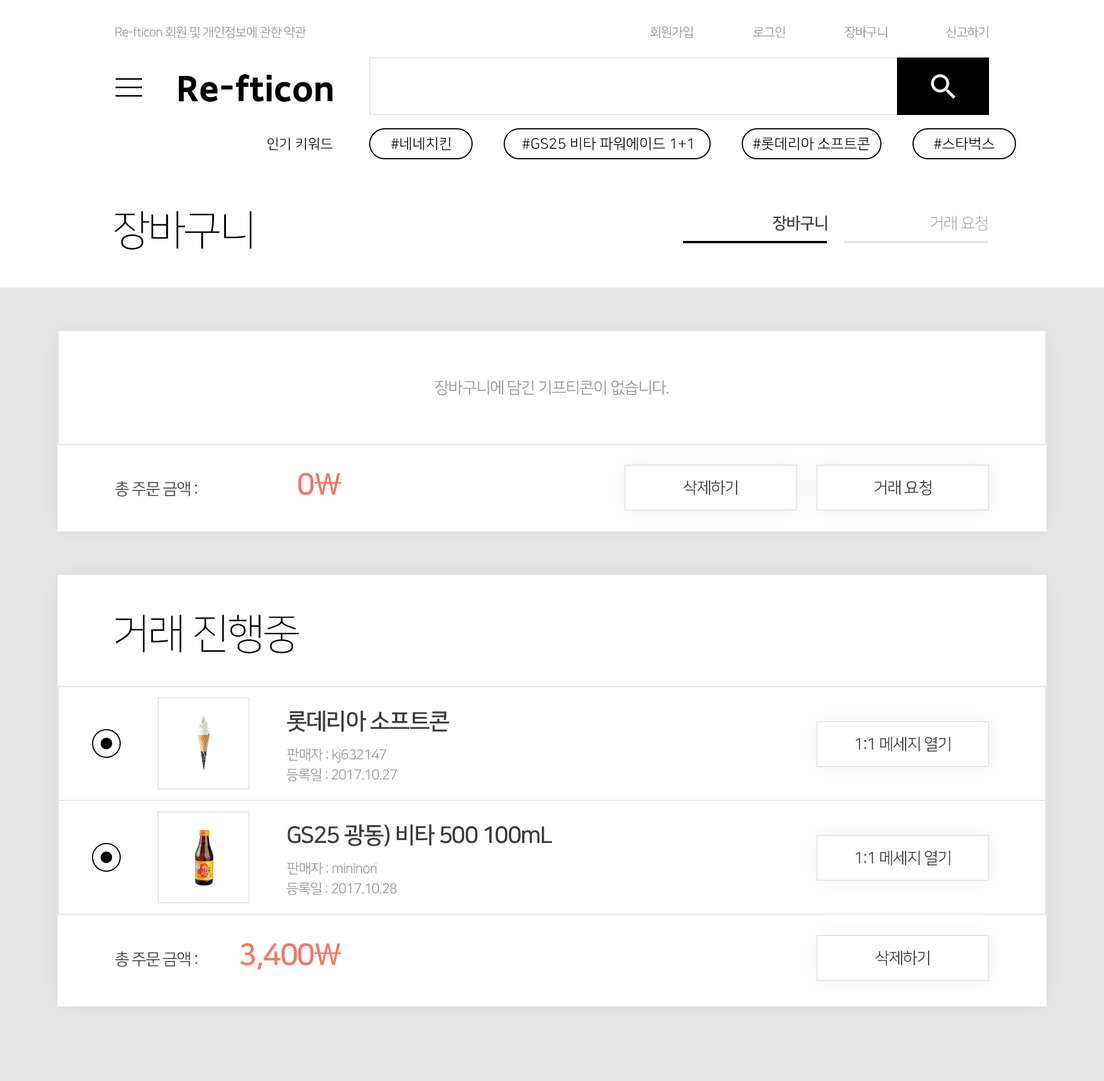
<style>
.page{position:relative;width:1104px;height:1081px;background:#ffffff}
.page>*{position:absolute;margin:0}
.t1{font:12.6px "NanumSquareOTFR";letter-spacing:-0.05em;color:#959595}
.t2{font:34.5px "SDGothicNeoc-gExBd";color:#000000}
.t3{font:13.8px "NanumSquareOTFR";color:#000000}
.t4{font:14.5px "NanumSquareOTFR";color:#000000}
.t5{font:41.4px "NanumSquareOTFL";letter-spacing:-0.05em;color:#000000}
.t6{font:16.1px "NanumSquareOTFB";letter-spacing:-0.05em;color:#3c3c3c}
.t7{font:16.1px "NanumSquareOTFL";letter-spacing:-0.05em;color:#959595}
.t8{font:16.1px "NanumSquareOTFR";letter-spacing:-0.05em;color:#959595}
.t9{font:29.9px "NanumSquareOTFB";letter-spacing:-0.05em;color:#f17969}
.t10{font:16.1px "NanumSquareOTFR";letter-spacing:-0.05em;color:#3c3c3c}
.t11{font:16.1px "NanumSquareOTFR";letter-spacing:-0.05em;color:#353535}
.t12{font:23px "NanumSquareOTFB";letter-spacing:-0.05em;color:#3c3c3c}
.t13{font:13.8px "NanumSquareOTFR";letter-spacing:-0.05em;color:#959595}
</style>
<div class="page">
<p class="t1" style="left:116px;top:26px;width:190px;height:13px">Re-fticon 회원 및 개인정보에 관한 약관</p>
<p class="t1" style="left:650px;top:26px;width:43px;height:12px">회원가입</p>
<p class="t1" style="left:753px;top:26px;width:32px;height:12px">로그인</p>
<p class="t1" style="left:844px;top:26px;width:43px;height:13px">장바구니</p>
<p class="t1" style="left:945px;top:26px;width:43px;height:12px">신고하기</p>
<p class="t2" style="left:179px;top:74px;width:154px;height:28px">Re-fticon</p>
<p class="t3" style="left:267px;top:137px;width:65px;height:14px">인기 키워드</p>
<p class="t4" style="left:391px;top:137px;width:60px;height:14px">#네네치킨</p>
<p class="t4" style="left:522px;top:137px;width:170px;height:14px">#GS25 비타 파워에이드 1+1</p>
<p class="t4" style="left:753px;top:137px;width:117px;height:14px">#롯데리아 소프트콘</p>
<p class="t4" style="left:933px;top:137px;width:61px;height:14px">#스타벅스</p>
<p class="t5" style="left:114px;top:211px;width:138px;height:38px">장바구니</p>
<p class="t6" style="left:772px;top:216px;width:55px;height:15px">장바구니</p>
<p class="t7" style="left:930px;top:216px;width:57px;height:15px">거래 요청</p>
<p class="t8" style="left:435px;top:380px;width:233px;height:15px">장바구니에 담긴 기프티콘이 없습니다.</p>
<p class="t9" style="left:298px;top:472px;width:43px;height:23px">0\</p>
<p class="t10" style="left:115px;top:481px;width:82px;height:16px">총 주문 금액 :</p>
<p class="t10" style="left:683px;top:480px;width:54px;height:15px">삭제하기</p>
<p class="t11" style="left:874px;top:480px;width:57px;height:15px">거래 요청</p>
<p class="t5" style="left:116px;top:614px;width:183px;height:40px">거래 진행중</p>
<p class="t12" style="left:287px;top:710px;width:162px;height:22px">롯데리아 소프트콘</p>
<p class="t10" style="left:855px;top:736px;width:95px;height:15px">1:1 메세지 열기</p>
<p class="t13" style="left:287px;top:748px;width:99px;height:14px">판매자 : kj632147</p>
<p class="t13" style="left:286px;top:768px;width:111px;height:13px">등록일 : 2017.10.27</p>
<p class="t12" style="left:287px;top:824px;width:265px;height:22px">GS25 광동) 비타 500 100mL</p>
<p class="t10" style="left:855px;top:850px;width:95px;height:15px">1:1 메세지 열기</p>
<p class="t13" style="left:287px;top:862px;width:89px;height:13px">판매자 : mininori</p>
<p class="t13" style="left:286px;top:882px;width:111px;height:13px">등록일 : 2017.10.28</p>
<p class="t10" style="left:115px;top:951px;width:82px;height:16px">총 주문 금액 :</p>
<p class="t9" style="left:240px;top:943px;width:101px;height:26px">3,400\</p>
<p class="t10" style="left:875px;top:950px;width:54px;height:15px">삭제하기</p>
</div>
